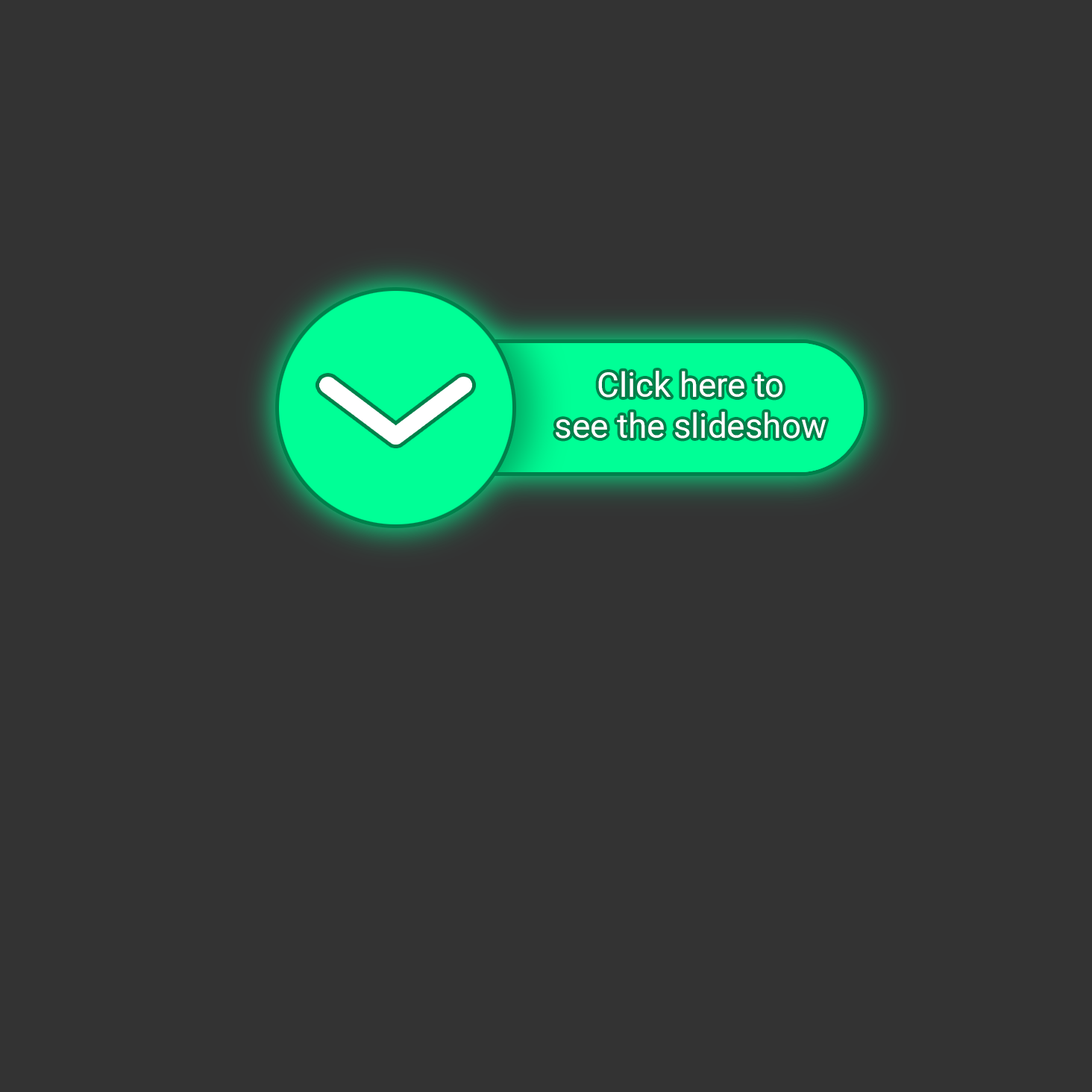
<style>
.page{position:relative;width:1092px;height:1092px;background:#333333}
.page>*{position:absolute;margin:0}
.t1{font:34.2px "Roboto-Regular";color:#ffffff}
</style>
<div class="page">
<p class="t1" style="left:556px;top:371px;width:270px;height:68px;text-align:center">Click here to<br>see the slideshow</p>
</div>
